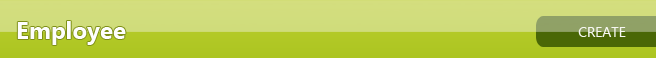
<style>
.page{position:relative;width:656px;height:58px}
.page>*{position:absolute;margin:0}
.t1{font:24px "SegoeUI-Bold";color:#fefefe}
.t2{font:14px "SegoeUI";color:#f6f7f1}
</style>
<div class="page">
<p class="t1" style="left:17px;top:21px;width:109px;height:24px">Employee</p>
<p class="t2" style="left:578px;top:27px;width:48px;height:10px">CREATE</p>
</div>
